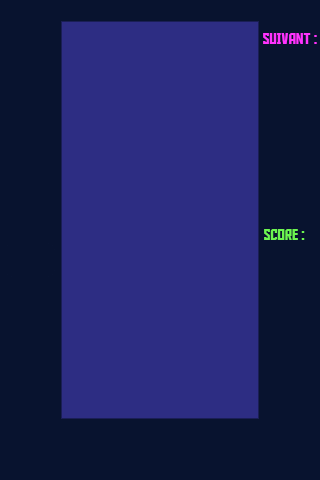
<style>
.page{position:relative;width:320px;height:480px;background:#2d2d83}
.page>*{position:absolute;margin:0}
.t1{font:15px "AldotheApache";color:#ff33ff}
.t2{font:15px "AldotheApache";color:#6df550}
</style>
<div class="page">
<p class="t1" style="left:263px;top:33px;width:54px;height:11px">SUIVANT :</p>
<p class="t2" style="left:264px;top:229px;width:41px;height:11px">score :</p>
</div>
